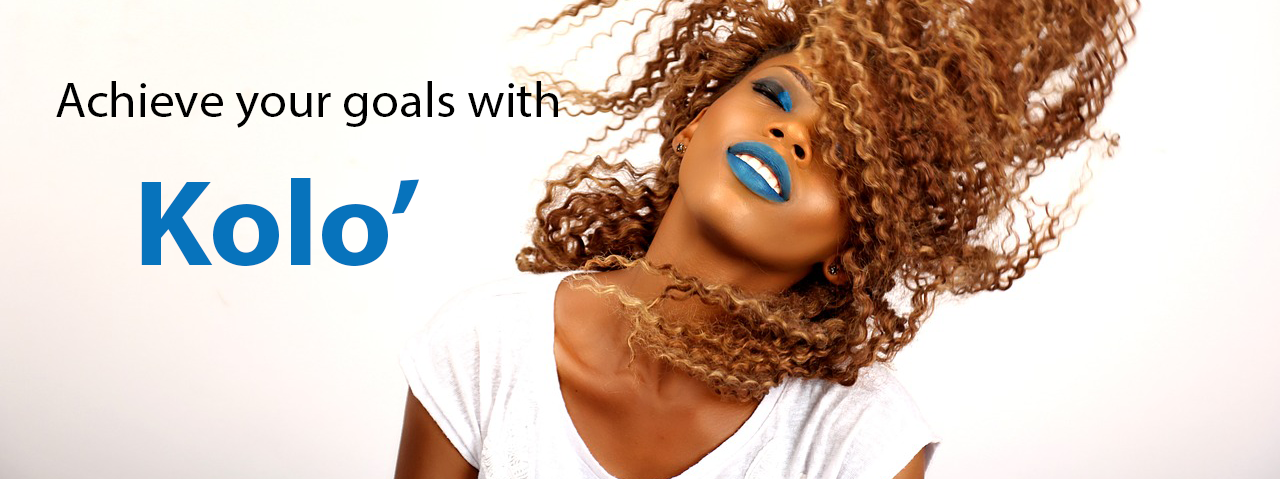
<style>
.page{position:relative;width:1280px;height:479px}
.page>*{position:absolute;margin:0}
.t1{font:11.8px "MyriadHebrew-Regular";color:#000000;scale:1.04 1}
.t2{font:123.2px "MyriadHebrew-Bold";color:#0773bc;scale:1.04 1}
.t3{font:123.2px "MyriadHebrew-Bold";color:#ffffff;scale:1.04 1}
</style>
<div class="page">
<p class="t1" style="left:56px;top:81px;width:502px;height:185px">Achieve your goals with <span class="t2">Kolo’</span><span class="t3">o</span></p>
</div>
